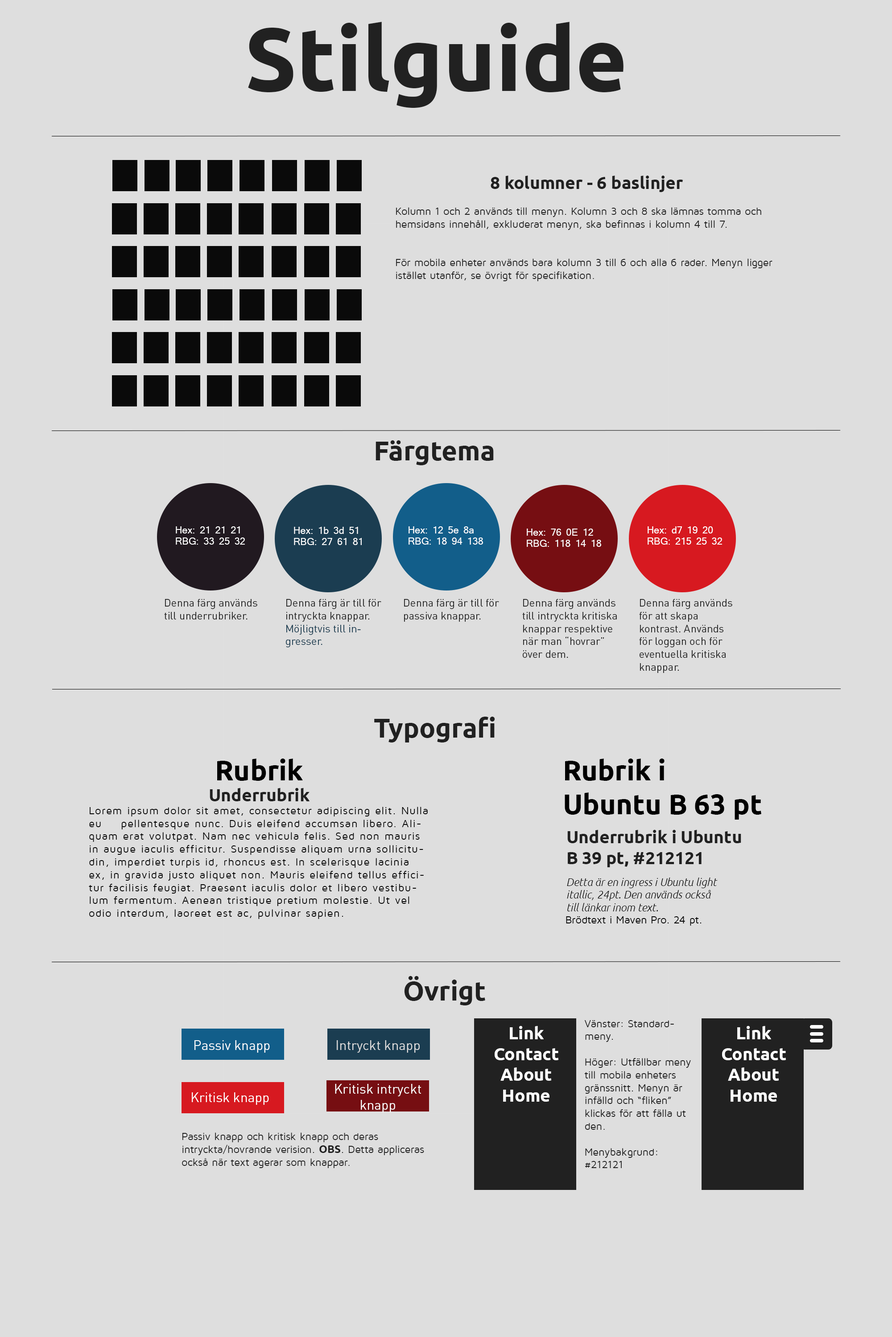
<style>
.page{position:relative;width:892px;height:1337px;background:#dedede}
.page>*{position:absolute;margin:0}
.t1{font:89.2px "Ubuntu-Bold";color:#212121}
.t2{font:10.7px "MavenProRegular";color:#212121}
.t3{font:17.4px "Ubuntu-Bold";color:#212121}
.t4{font:26.7px "Ubuntu-Bold";color:#212121}
.t5{font:9.4px "Mangal";color:#ffffff}
.t6{font:10.7px "DINPro-Regular";color:#212121}
.t7{font:10.7px "DINPro-Regular";color:#1b3d51}
.t8{font:10.7px "MavenProRegular";letter-spacing:0.07em;color:#000000}
.t9{font:10.7px "MavenProRegular";color:#000000}
.t10{font:28.1px "Ubuntu-Bold";color:#000000}
.t11{font:10.7px "Ubuntu-LightItalic";color:#000000}
.t12{font:26.7px "DINPro-Regular";color:#000000}
.t13{font:17.4px "Ubuntu-Bold";color:#ffffff}
.t14{font:13.4px "DINPro-Regular";color:#ffffff}
.t15{font:13.4px "DINPro-Regular";color:#dedede}
.t16{font:10.7px "DINPro-Regular";color:#dedede}
.t17{font:10.7px "Ubuntu-Bold";color:#212121}
</style>
<div class="page">
<p class="t1" style="left:248px;top:22px;width:375px;height:86px">Stilguide</p>
<p class="t2" style="left:396px;top:176px;width:376px;height:105px;text-align:center"><span class="t3">8 kolumner - 6 baslinjer<br></span><br>Kolumn 1 och 2 används till menyn. Kolumn 3 och 8 ska lämnas tomma och <br>hemsidans innehåll, exkluderat menyn, ska befinnas i kolumn 4 till 7. <br><br><br>För mobila enheter används bara kolumn 3 till 6 och alla 6 rader. Menyn ligger <br>istället utanför, se övrigt för specifikation.</p>
<p class="t4" style="left:375px;top:440px;width:119px;height:25px">Färgtema</p>
<p class="t5" style="left:176px;top:526px;width:69px;height:19px">Hex: 21 21 21<br>RBG: 33 25 32</p>
<p class="t5" style="left:294px;top:527px;width:68px;height:18px">Hex: 1b 3d 51<br>RBG: 27 61 81</p>
<p class="t5" style="left:408px;top:526px;width:75px;height:19px">Hex: 12 5e 8a<br>RBG: 18 94 138</p>
<p class="t5" style="left:526px;top:529px;width:75px;height:18px">Hex: 76 0E 12<br>RBG: 118 14 18</p>
<p class="t5" style="left:647px;top:526px;width:75px;height:19px">Hex: d7 19 20<br>RBG: 215 25 32</p>
<p class="t6" style="left:164px;top:599px;width:93px;height:21px">Denna färg används till underrubriker.</p>
<p class="t6" style="left:286px;top:599px;width:95px;height:49px">Denna färg är till för intryckta knappar. <span class="t7">Möjligtvis till ingresser.</span></p>
<p class="t6" style="left:404px;top:599px;width:95px;height:23px">Denna färg är till för passiva knappar.</p>
<p class="t6" style="left:522px;top:599px;width:95px;height:59px">Denna färg används till intryckta kritiska knappar respektive när man “hovrar” över dem.</p>
<p class="t6" style="left:639px;top:599px;width:93px;height:74px">Denna färg används för att skapa <br>kontrast. Används för loggan och för eventuella kritiska knappar.</p>
<p class="t4" style="left:374px;top:717px;width:121px;height:26px">Typografi</p>
<p class="t8" style="left:89px;top:759px;width:339px;height:160px"><span class="t9"><br></span><span class="t10">Rubrik<br></span><span class="t3">Underrubrik<br></span>Lorem ipsum dolor sit amet, consectetur adipiscing elit. Nulla eu  pellentesque nunc. Duis eleifend accumsan libero. Aliquam erat volutpat. Nam nec vehicula felis. Sed non mauris in augue iaculis efficitur. Suspendisse aliquam urna sollicitudin, imperdiet turpis id, rhoncus est. In scelerisque lacinia ex, in gravida justo aliquet non. Mauris eleifend tellus efficitur facilisis feugiat. Praesent iaculis dolor et libero vestibulum fermentum. Aenean tristique pretium molestie. Ut vel odio interdum, laoreet est ac, pulvinar sapien.</p>
<p class="t10" style="left:564px;top:759px;width:197px;height:61px">Rubrik i <br>Ubuntu B 63 pt</p>
<p class="t3" style="left:567px;top:830px;width:174px;height:38px">Underrubrik i Ubuntu B 39 pt, #212121</p>
<p class="t11" style="left:567px;top:878px;width:150px;height:34px">Detta är en ingress i Ubuntu light itallic, 24pt. Den används också till länkar inom text.<br><br><span class="t12"><br>RUBRIK</span></p>
<p class="t9" style="left:566px;top:917px;width:135px;height:9px">Brödtext i Maven Pro. 24 pt.</p>
<p class="t4" style="left:404px;top:976px;width:81px;height:30px">Övrigt</p>
<p class="t2" style="left:584px;top:1020px;width:107px;height:148px">Vänster: Standardmeny.<br><br>Höger: Utfällbar meny till mobila enheters gränssnitt. Menyn är infälld och “fliken” klickas för att fälla ut den.<br><br>Menybakgrund: #212121</p>
<p class="t13" style="left:494px;top:1026px;width:65px;height:76px;text-align:center">Link<br>Contact<br>About<br>Home</p>
<p class="t13" style="left:722px;top:1026px;width:64px;height:76px;text-align:center">Link<br>Contact<br>About<br>Home</p>
<p class="t14" style="left:194px;top:1041px;width:76px;height:12px"><span class="t6"> <br></span>Passiv knapp</p>
<p class="t15" style="left:337px;top:1041px;width:82px;height:12px"><span class="t16"><br></span>Intryckt knapp</p>
<p class="t14" style="left:335px;top:1084px;width:86px;height:29px;text-align:center">Kritisk intryckt knapp</p>
<p class="t14" style="left:192px;top:1093px;width:77px;height:12px"><span class="t15"><br></span>Kritisk knapp</p>
<p class="t2" style="left:182px;top:1133px;width:242px;height:35px">Passiv knapp och kritisk knapp och deras <br>intryckta/hovrande verision. <span class="t17">OBS</span>. Detta appliceras också när text agerar som knappar.</p>
</div>
